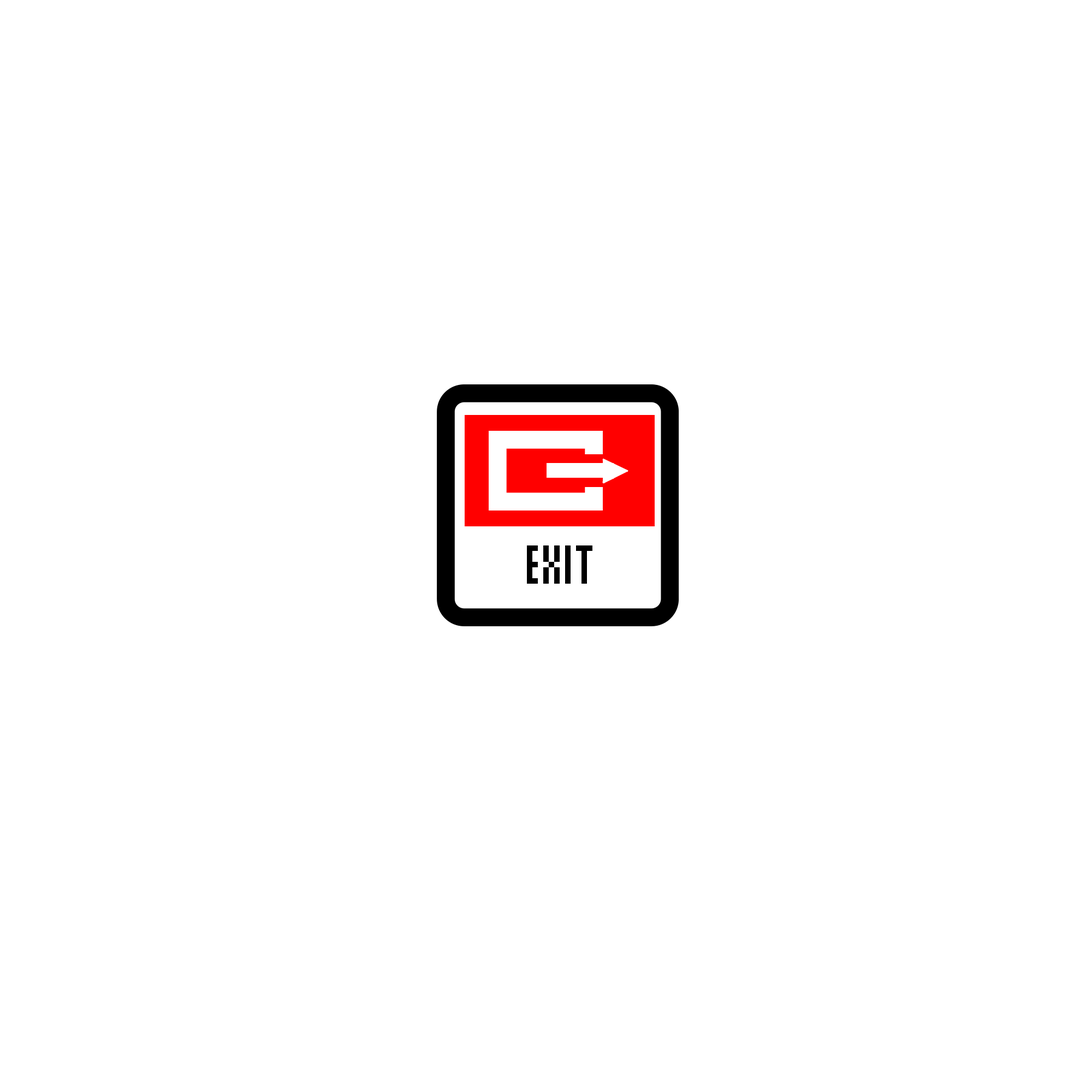
<style>
.page{position:relative;width:1092px;height:1092px;background:#ffffff}
.page>*{position:absolute;margin:0}
.t1{font:54.6px "pxl";color:#000000}
</style>
<div class="page">
<p class="t1" style="left:527px;top:545px;width:65px;height:39px">EXIT</p>
</div>
